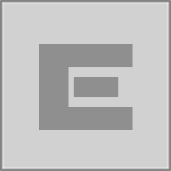
<style>
.page{position:relative;width:171px;height:171px;background:#d1d1d1}
.page>*{position:absolute;margin:0}
.t1{font:121px "Coalition";color:#8f8f8f}
</style>
<div class="page">
<p class="t1" style="left:39px;top:44px;width:94px;height:86px">e</p>
</div>
